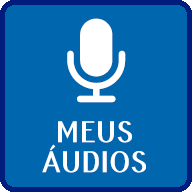
<style>
.page{position:relative;width:192px;height:192px;background:#0066ad}
.page>*{position:absolute;margin:0}
.t1{font:30px/30px "PfennigBold";color:#ffffff}
</style>
<div class="page">
<p class="t1" style="left:42px;top:121px;width:104px;height:52px;text-align:center">MEUS<br>ÁUDIOS</p>
</div>
